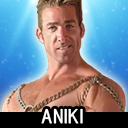
<style>
.page{position:relative;width:128px;height:128px}
.page>*{position:absolute;margin:0}
.t1{font:18px "HGPGothicE";color:#f4f4f4}
</style>
<div class="page">
<p class="t1" style="left:41px;top:108px;width:42px;height:16px">ANIKI</p>
</div>
